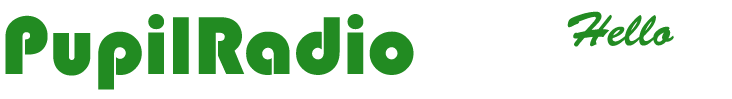
<style>
.page{position:relative;width:732px;height:99px;background:#ffffff}
.page>*{position:absolute;margin:0}
.t1{font:85px "Bauhaus93";color:#228b22}
.t2{font:48px "BrushScriptStd";color:#228b22}
.t3{font:48px "Bauhaus93";color:#ffffff}
</style>
<div class="page">
<p class="t1" style="left:5px;top:14px;width:409px;height:76px">PupilRadio</p>
<p class="t2" style="left:480px;top:11px;width:194px;height:46px"><span class="t3">Say </span>Hello</p>
</div>
